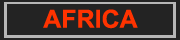
<style>
.page{position:relative;width:180px;height:40px;background:#232323}
.page>*{position:absolute;margin:0}
.t1{font:25px "Arial-BoldMT";color:#ff3300}
</style>
<div class="page">
<p class="t1" style="left:43px;top:9px;width:95px;height:20px">AFRICA</p>
</div>
